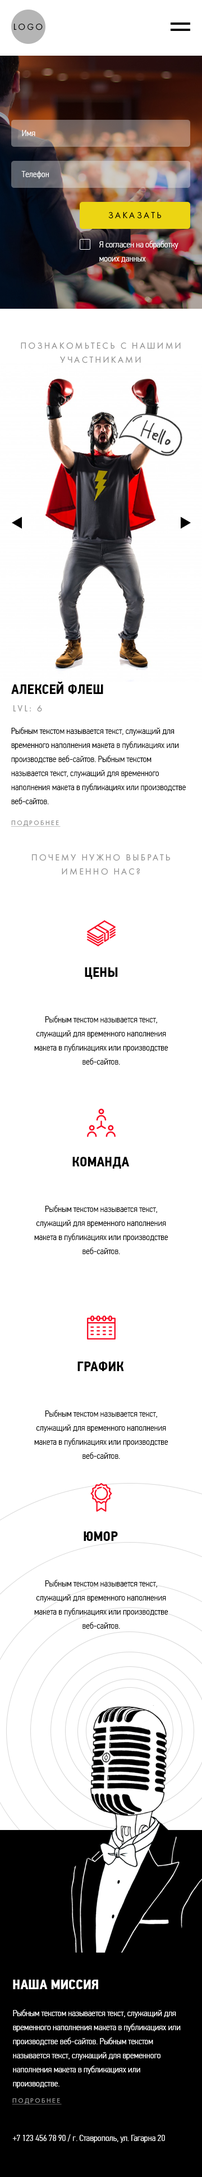
<style>
.page{position:relative;width:202px;height:2177px;background:#ffffff}
.page>*{position:absolute;margin:0}
.t1{font:9px "FuturaBookC";letter-spacing:0.2em;color:#000000;text-transform:uppercase}
.t2{font:9px "PFDinTextCondPro-Light";color:#ffffff}
.t3{font:9px/14.1px "PFDinTextCondPro-Light";color:#ffffff}
.t4{font:9px/14.1px "FuturaBookC";letter-spacing:0.2em;color:#929292;text-transform:uppercase}
.t5{font:14.1px "PFDinTextCondPro-Bold";color:#000000;text-transform:uppercase}
.t6{font:9px "FuturaBookC";letter-spacing:0.2em;color:#929292;text-transform:uppercase}
.t7{font:9px/14.1px "PFDinTextCondPro-Light";color:#000000}
.t8{font:6.8px "FuturaBookC";letter-spacing:0.2em;color:#929292;text-transform:uppercase;text-decoration:underline}
.t9{font:14.1px "PFDinTextCondPro-Bold";color:#ffffff;text-transform:uppercase}
</style>
<div class="page">
<p class="t1" style="left:14px;top:24px;width:29px;height:6px">logo</p>
<p class="t2" style="left:22px;top:130px;width:13px;height:6px">Имя</p>
<p class="t2" style="left:21px;top:171px;width:28px;height:8px">Телефон</p>
<p class="t1" style="left:109px;top:212px;width:52px;height:7px">Заказать</p>
<p class="t3" style="left:100px;top:241px;width:79px;height:22px">Я согласен на обработку<br>мооих данных</p>
<p class="t4" style="left:21px;top:342px;width:160px;height:21px;text-align:center">Познакомьтесь с нашими<br>участниками</p>
<p class="t5" style="left:11px;top:682px;width:93px;height:12px">Алексей флеш</p>
<p class="t6" style="left:14px;top:705px;width:28px;height:7px">LVL: 6</p>
<p class="t7" style="left:11px;top:727px;width:175px;height:77px">Рыбным текстом называется текст, служащий для временного наполнения макета в публикациях или производстве веб-сайтов. Рыбным текстом называется текст, служащий для временного наполнения макета в публикациях или производстве веб-сайтов.</p>
<p class="t8" style="left:11px;top:821px;width:50px;height:6px">подробнее</p>
<p class="t4" style="left:32px;top:854px;width:138px;height:21px;text-align:center">почему нужно выбрать<br>именно нас?</p>
<p class="t5" style="left:85px;top:968px;width:33px;height:11px">Цены</p>
<p class="t7" style="left:34px;top:1016px;width:135px;height:49px;text-align:center">Рыбным текстом называется текст, служащий для временного наполнения макета в публикациях или производстве веб-сайтов.</p>
<p class="t5" style="left:73px;top:1157px;width:57px;height:12px">Команда</p>
<p class="t7" style="left:34px;top:1205px;width:135px;height:49px;text-align:center">Рыбным текстом называется текст, служащий для временного наполнения макета в публикациях или производстве веб-сайтов.</p>
<p class="t5" style="left:78px;top:1362px;width:46px;height:9px">График</p>
<p class="t7" style="left:34px;top:1410px;width:135px;height:49px;text-align:center">Рыбным текстом называется текст, служащий для временного наполнения макета в публикациях или производстве веб-сайтов.</p>
<p class="t5" style="left:84px;top:1532px;width:34px;height:9px">юмор</p>
<p class="t7" style="left:34px;top:1580px;width:135px;height:49px;text-align:center">Рыбным текстом называется текст, служащий для временного наполнения макета в публикациях или производстве веб-сайтов.</p>
<p class="t9" style="left:13px;top:1980px;width:85px;height:10px">Наша миссия</p>
<p class="t3" style="left:13px;top:2010px;width:168px;height:79px">Рыбным текстом называется текст, служащий для временного наполнения макета в публикациях или производстве веб-сайтов. Рыбным текстом называется текст, служащий для временного наполнения макета в публикациях или производстве.</p>
<p class="t8" style="left:12px;top:2099px;width:50px;height:6px">подробнее</p>
<p class="t2" style="left:12px;top:2135px;width:153px;height:8px">+7 123 456 78 90 / г. Ставрополь, ул. Гагарна 20</p>
</div>
